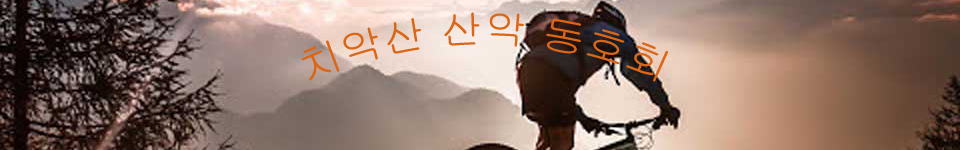
<style>
.page{position:relative;width:960px;height:150px}
.page>*{position:absolute;margin:0}
.t1{font:40px "Gulim";color:#db6616}
</style>
<div class="page">
<p class="t1" style="left:301px;top:12px;width:367px;height:70px">치악산 산악 동호회</p>
</div>
